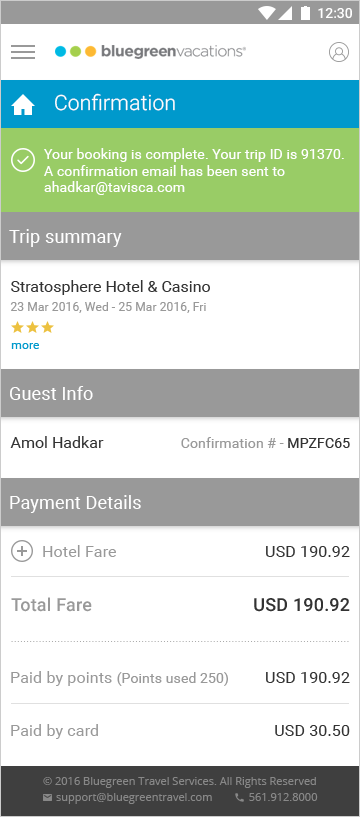
<style>
.page{position:relative;width:360px;height:817px;background:#ffffff}
.page>*{position:absolute;margin:0}
.t1{font:21px "Roboto-Light";letter-spacing:0.01em;color:#ffffff}
.t2{font:14px "Roboto-Regular";letter-spacing:0.01em;color:#ffffff}
.t3{font:18px "Roboto-Regular";letter-spacing:0.01em;color:#ffffff}
.t4{font:16px "Roboto-Regular";color:#333333}
.t5{font:12px "Roboto-Regular";letter-spacing:0.01em;color:#999999}
.t6{font:12px "Roboto-Regular";letter-spacing:0.01em;color:#0099cc}
.t7{font:14px "Roboto-Regular";letter-spacing:0.01em;color:#999999}
.t8{font:14px "Roboto-Regular";letter-spacing:0.01em;color:#333333}
.t9{font:16px "Roboto-Regular";letter-spacing:0.01em;color:#999999}
.t10{font:16px "Roboto-Regular";letter-spacing:0.01em;color:#333333}
.t11{font:18px "Roboto-Medium";letter-spacing:0.01em;color:#999999}
.t12{font:18px "Roboto-Medium";letter-spacing:0.01em;color:#333333}
</style>
<div class="page">
<p class="t1" style="left:55px;top:93px;width:120px;height:18px">Confirmation</p>
<p class="t2" style="left:44px;top:148px;width:300px;height:47px">Your booking is complete. Your trip ID is 91370. A confirmation email has been sent to <br>ahadkar@tavisca.com</p>
<p class="t3" style="left:9px;top:229px;width:113px;height:18px">Trip summary</p>
<p class="t4" style="left:11px;top:280px;width:199px;height:15px">Stratosphere Hotel &amp; Casino</p>
<p class="t5" style="left:10px;top:302px;width:196px;height:11px">23 Mar 2016, Wed - 25 Mar 2016, Fri</p>
<p class="t6" style="left:11px;top:343px;width:28px;height:6px">more</p>
<p class="t3" style="left:10px;top:386px;width:83px;height:14px">Guest Info</p>
<p class="t4" style="left:10px;top:436px;width:94px;height:12px">Amol Hadkar</p>
<p class="t7" style="left:181px;top:437px;width:169px;height:11px">Confirmation # -<span class="t8"> MPZFC65</span></p>
<p class="t3" style="left:10px;top:495px;width:131px;height:18px">Payment Details</p>
<p class="t9" style="left:43px;top:545px;width:73px;height:12px">Hotel Fare</p>
<p class="t10" style="left:266px;top:546px;width:84px;height:11px">USD 190.92</p>
<p class="t11" style="left:11px;top:597px;width:81px;height:15px">Total Fare</p>
<p class="t12" style="left:254px;top:598px;width:96px;height:14px">USD 190.92</p>
<p class="t7" style="left:11px;top:671px;width:217px;height:15px"><span class="t9">Paid by points </span>(Points used 250)</p>
<p class="t10" style="left:266px;top:672px;width:84px;height:11px">USD 190.92</p>
<p class="t9" style="left:11px;top:724px;width:87px;height:15px">Paid by card</p>
<p class="t10" style="left:275px;top:725px;width:75px;height:11px">USD 30.50</p>
</div>
